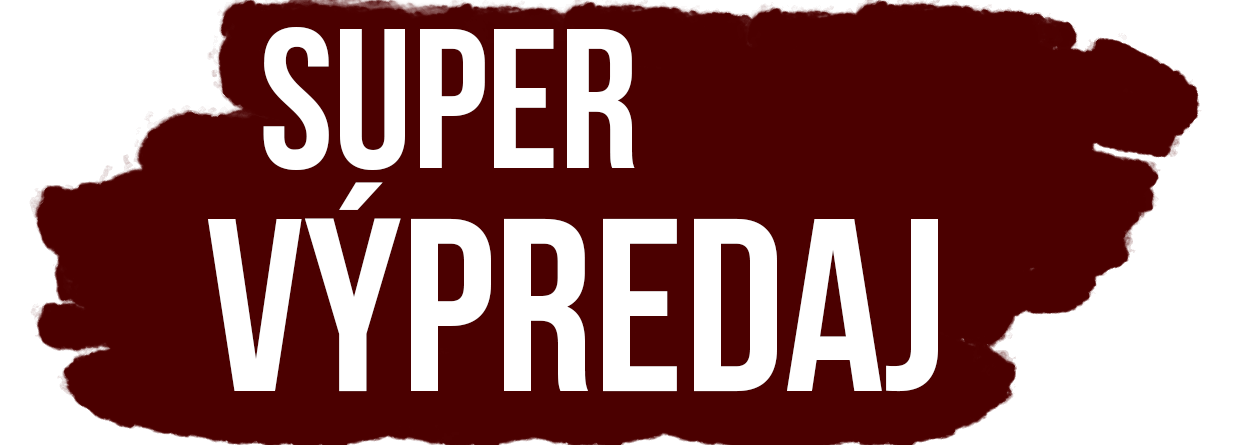
<style>
.page{position:relative;width:1240px;height:445px;background:#4b0000}
.page>*{position:absolute;margin:0}
.t1{font:198px "BebasNeueBold";color:#ffffff}
.t2{font:246.3px "BebasNeueBold";color:#ffffff}
</style>
<div class="page">
<p class="t1" style="left:263px;top:27px;width:372px;height:143px">super</p>
<p class="t2" style="left:208px;top:182px;width:730px;height:210px">výpredaj</p>
</div>
